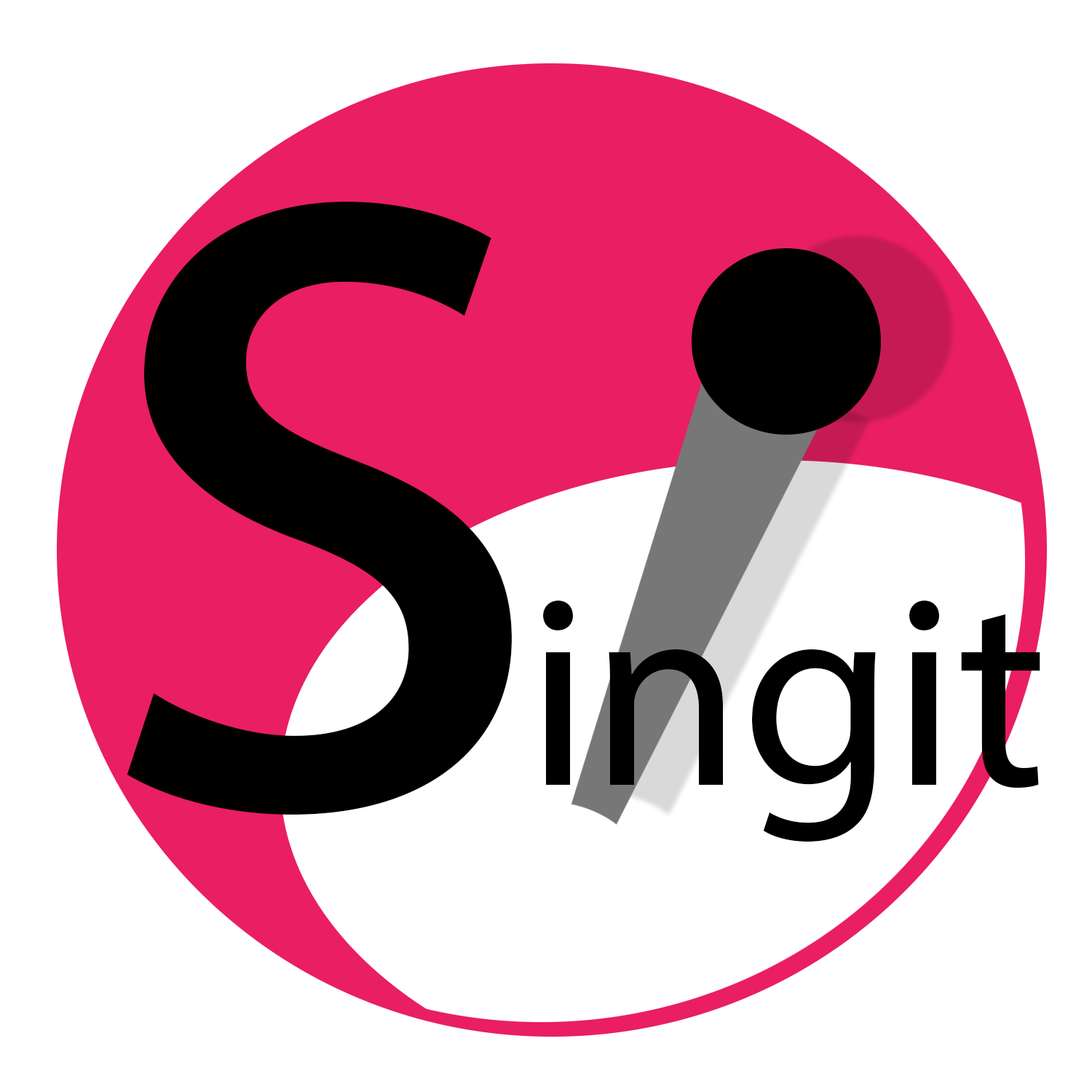
<style>
.page{position:relative;width:1092px;height:1092px;background:#ffffff}
.page>*{position:absolute;margin:0}
.t1{font:1213.3px "MyriadPro-Regular";color:#000000}
.t2{font:273px "MyriadPro-Regular";color:#000000}
</style>
<div class="page">
<p class="t1" style="left:127px;top:202px;width:385px;height:613px">s</p>
<p class="t2" style="left:543px;top:600px;width:497px;height:242px">ingit</p>
</div>
